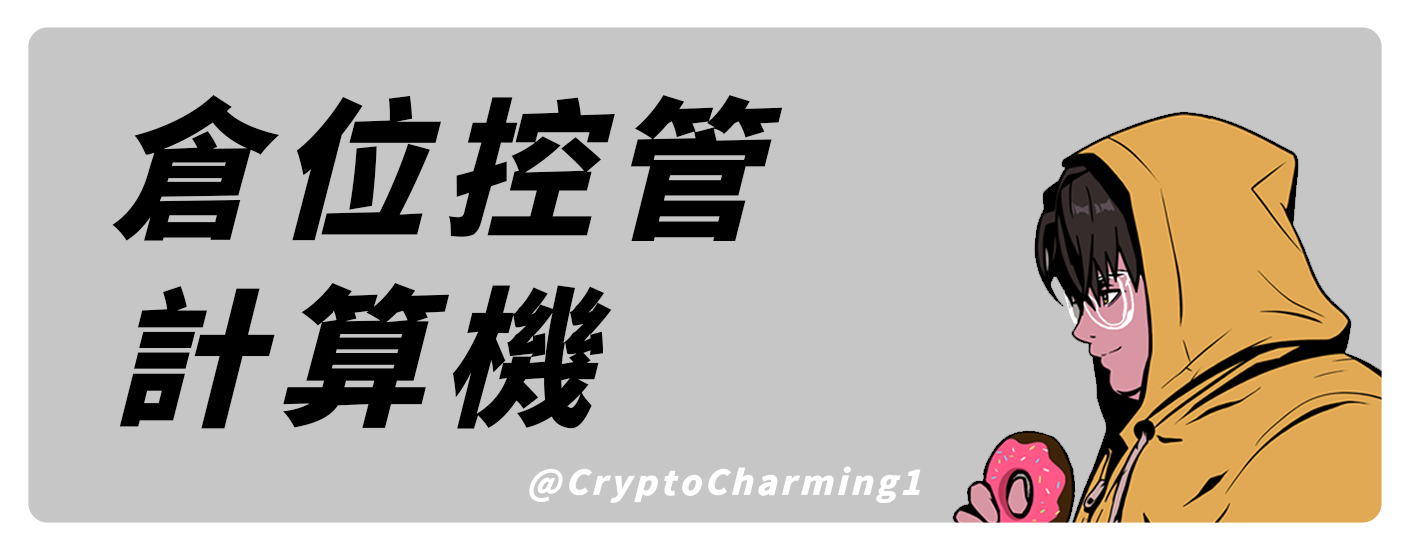
<style>
.page{position:relative;width:1410px;height:553px;background:#c6c6c6}
.page>*{position:absolute;margin:0}
.t1{font:150px/188px "Source-KeynoteartHans-Regular";letter-spacing:0.1em;color:#000001}
.t2{font:34px "Source-KeynoteartHans-Regular";letter-spacing:0.1em;color:#ffffff}
</style>
<div class="page">
<p class="t1" style="left:112px;top:95px;width:671px;height:334px">倉位控管<br>計算機</p>
<p class="t2" style="left:529px;top:466px;width:392px;height:37px">@CryptoCharming1</p>
</div>
